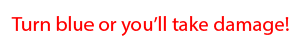
<style>
.page{position:relative;width:300px;height:50px;background:#ffffff}
.page>*{position:absolute;margin:0}
.t1{font:20.8px "MyriadPro-Regular";color:#ff0000}
</style>
<div class="page">
<p class="t1" style="left:11px;top:16px;width:278px;height:20px">Turn blue or you’ll take damage!</p>
</div>
